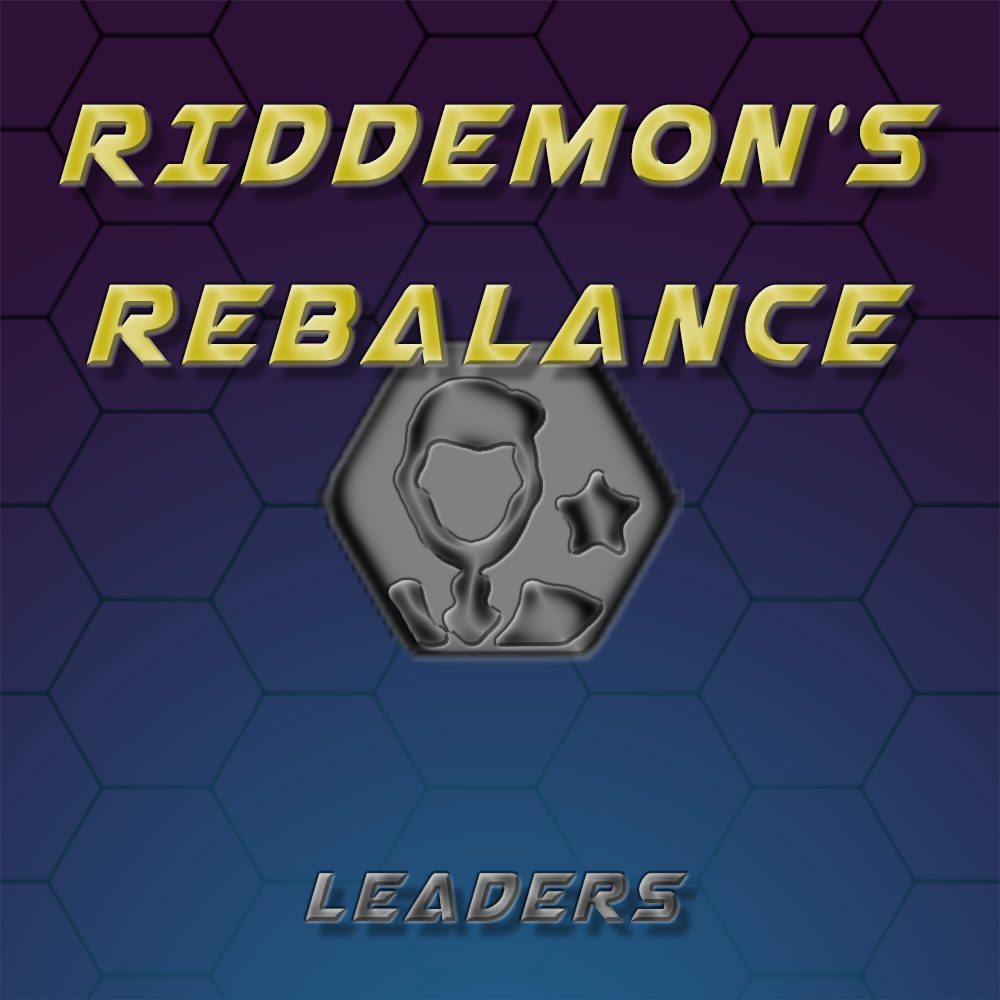
<style>
.page{position:relative;width:1000px;height:1000px}
.page>*{position:absolute;margin:0}
.t1{font:150px "AirstrikeCondensed";letter-spacing:0.08em;text-transform:uppercase}
.t2{font:90px "AirstrikeCondensed";letter-spacing:0.08em;text-transform:uppercase}
</style>
<div class="page">
<p class="t1" style="left:59px;top:104px;width:882px;height:261px;text-align:center">Riddemon's<br>Rebalance</p>
<p class="t2" style="left:305px;top:873px;width:383px;height:48px">Leaders</p>
</div>
